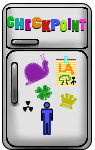
<style>
.page{position:relative;width:95px;height:150px;background:#e2e2e2}
.page>*{position:absolute;margin:0}
.t1{font:14.7px "PoplarStd";color:#00c71c}
.t2{font:14.8px "PoplarStd";color:#e28501;scale:1.43 1}
.t3{font:14.8px "PoplarStd";color:#19a8aa;scale:1.35 1}
.t4{font:14.7px "PoplarStd";color:#c700b2}
.t5{font:14.8px "PoplarStd";color:#c71c00;scale:1.32 1}
.t6{font:14.8px "PoplarStd";color:#4653ff;scale:1.31 1}
.t7{font:14.7px "PoplarStd";color:#a2e501}
.t8{font:14.7px "PoplarStd";color:#8800c7}
.t9{font:14.7px "PoplarStd";color:#1b920f}
.t10{font:14.7px "PoplarStd";color:#ff2dd5}
</style>
<div class="page">
<p class="t1" style="left:7px;top:16px;width:7px;height:11px">C</p>
<p class="t2" style="left:32px;top:17px;width:10px;height:11px">C</p>
<p class="t3" style="left:15px;top:18px;width:9px;height:11px">H</p>
<p class="t4" style="left:25px;top:19px;width:6px;height:11px">E</p>
<p class="t5" style="left:42px;top:20px;width:9px;height:11px">K</p>
<p class="t6" style="left:51px;top:19px;width:9px;height:11px">P</p>
<p class="t7" style="left:60px;top:20px;width:7px;height:11px">O</p>
<p class="t8" style="left:68px;top:18px;width:3px;height:11px">I</p>
<p class="t9" style="left:72px;top:20px;width:7px;height:11px">N</p>
<p class="t10" style="left:79px;top:19px;width:7px;height:11px">T</p>
</div>
